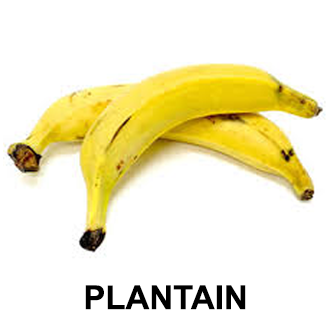
<style>
.page{position:relative;width:330px;height:330px;background:#ffffff}
.page>*{position:absolute;margin:0}
.t1{font:33px "Arial-BoldMT";color:#000000}
</style>
<div class="page">
<p class="t1" style="left:85px;top:285px;width:161px;height:25px">PLANTAIN</p>
</div>
